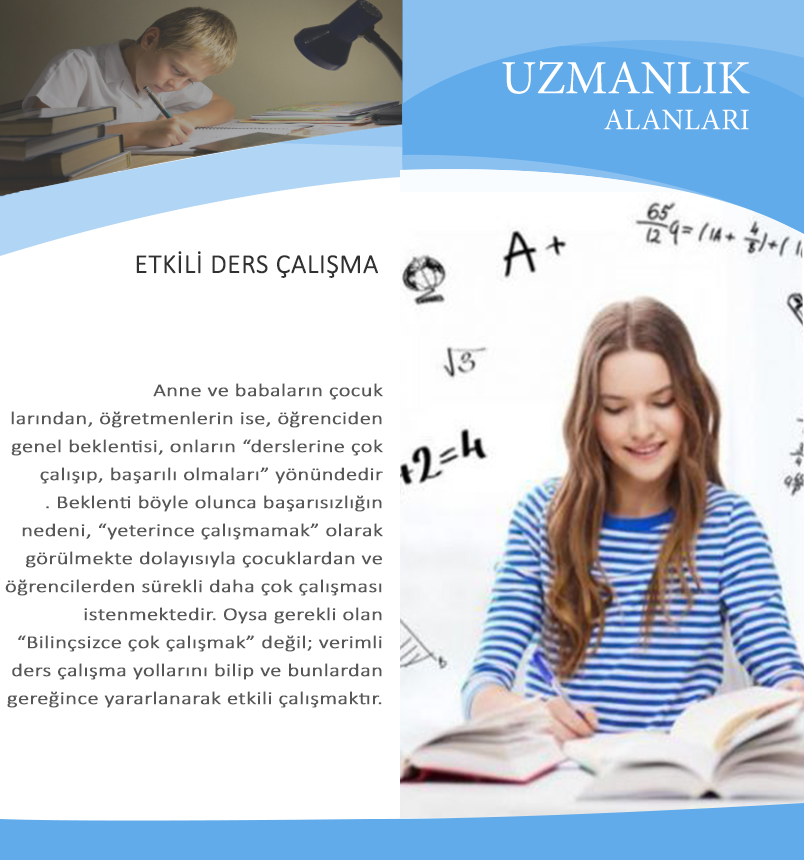
<style>
.page{position:relative;width:804px;height:860px;background:#ffffff}
.page>*{position:absolute;margin:0}
.t1{font:47.6px "MinionPro-Regular";color:#ffffff}
.t2{font:30px "MinionPro-Regular";color:#ffffff}
.t3{font:27px "Calibri-Light";color:#313131;font-weight:bold}
.t4{font:18.1px/28px "Calibri-Light";color:#575757;font-weight:bold;scale:1.22 1}
</style>
<div class="page">
<p class="t1" style="left:502px;top:61px;width:248px;height:69px;text-align:right">UZMANLIK<br><span class="t2"> ALANLARI</span></p>
<p class="t3" style="left:136px;top:251px;width:242px;height:27px">ETKİLİ DERS ÇALIŞMA</p>
<p class="t4" style="left:5px;top:383px;width:378px;height:325px;text-align:right">Anne ve babaların çocuk<br>larından, öğretmenlerin ise, öğrenciden<br> genel beklentisi, onların “derslerine çok<br> çalışıp, başarılı olmaları” yönündedir<br>. Beklenti böyle olunca başarısızlığın<br> nedeni, “yeterince çalışmamak” olarak<br> görülmekte dolayısıyla çocuklardan ve<br> öğrencilerden sürekli daha çok çalışması<br> istenmektedir. Oysa gerekli olan<br> “Bilinçsizce çok çalışmak” değil; verimli<br>ders çalışma yollarını bilip ve bunlardan<br>gereğince yararlanarak etkili çalışmaktır.</p>
</div>
